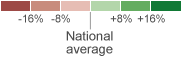
<style>
.page{position:relative;width:182px;height:60px;background:#ffffff}
.page>*{position:absolute;margin:0}
.t1{font:11px "ArialMT";color:#4c4c4c}
.t2{font:11px "ArialMT"}
.t3{font:13px/13px "ArialMT";color:#4c4c4c}
</style>
<div class="page">
<p class="t1" style="left:18px;top:14px;width:25px;height:9px">-16%</p>
<p class="t2" style="left:51px;top:14px;width:19px;height:9px">-8%</p>
<p class="t1" style="left:110px;top:14px;width:22px;height:9px">+8%</p>
<p class="t1" style="left:137px;top:14px;width:28px;height:9px">+16%</p>
<p class="t3" style="left:66px;top:31px;width:47px;height:25px;text-align:center">National <br>average</p>
</div>
